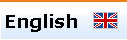
<style>
.page{position:relative;width:127px;height:40px}
.page>*{position:absolute;margin:0}
.t1{font:18px "Verdana-Bold";color:#000000}
</style>
<div class="page">
<p class="t1" style="left:6px;top:14px;width:71px;height:18px">English</p>
</div>
